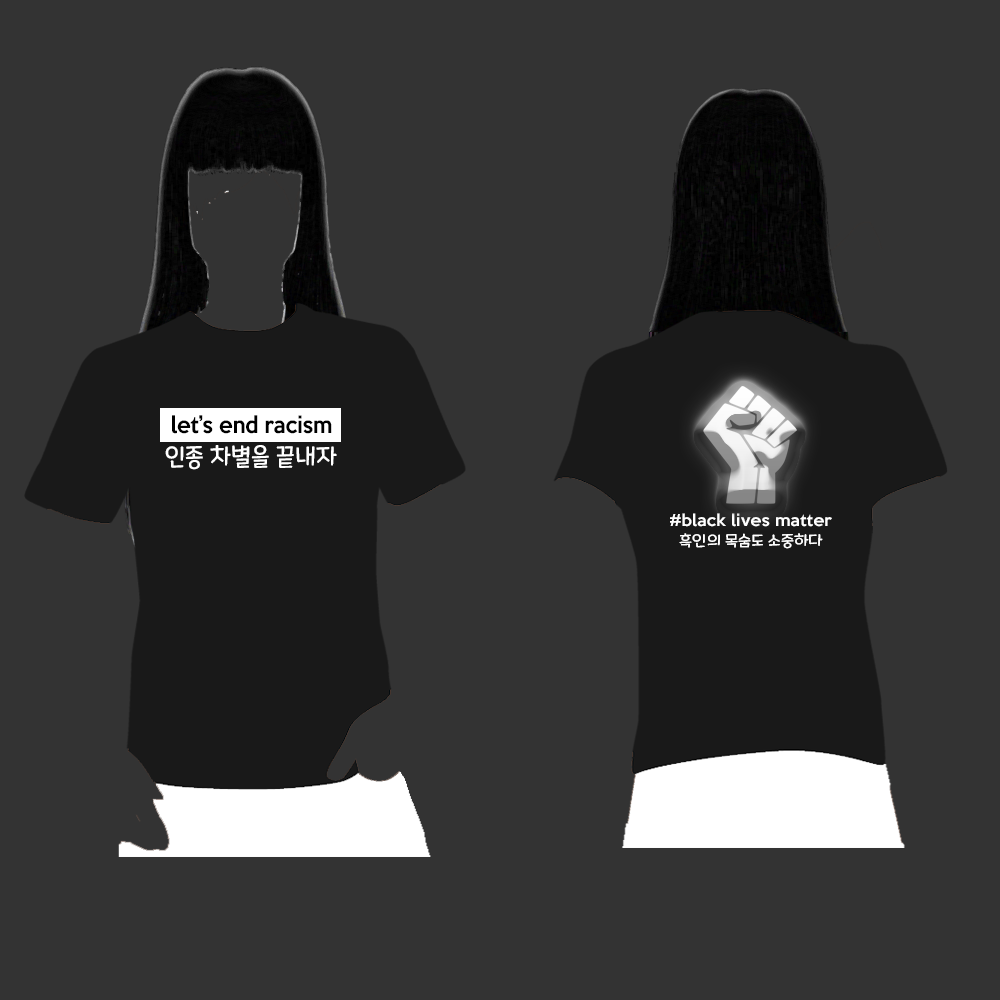
<style>
.page{position:relative;width:1000px;height:1000px;background:#333333}
.page>*{position:absolute;margin:0}
.t1{font:21.2px "KeepCalm-Medium";color:#000000;scale:0.94 1}
.t2{font:24.7px "MaplestoryOTFLight";color:#ffffff;scale:0.94 1}
.t3{font:15.1px "KeepCalm-Medium";color:#ffffff;scale:1.07 1}
.t4{font:3.6px "MaplestoryOTFLight";color:#ffffff;scale:1.07 1}
</style>
<div class="page">
<p class="t1" style="left:172px;top:415px;width:160px;height:19px">let’s end racism</p>
<p class="t2" style="left:165px;top:445px;width:172px;height:25px">인종 차별을 끝내자</p>
<p class="t3" style="left:670px;top:513px;width:162px;height:14px">#black lives matter</p>
<p class="t4" style="left:679px;top:533px;width:144px;height:16px;text-align:center">흑인의 목숨도 소중하다</p>
</div>
